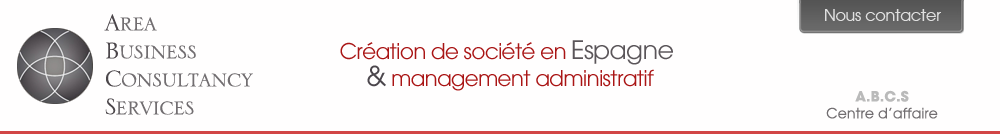
<style>
.page{position:relative;width:1000px;height:134px;background:#fffefe}
.page>*{position:absolute;margin:0}
.t1{font:30px/28px "SerlioLH";letter-spacing:-0.03em;color:#726e71}
.t2{font:30px/28px "SerlioLH";letter-spacing:-0.03em;color:#4b464a}
.t3{font:21.5px/27.3px "AvantGarde-Book";letter-spacing:-0.03em;color:#aa1515}
.t4{font:21.5px/27.3px "AvantGarde-Book";letter-spacing:-0.03em;color:#a91515}
.t5{font:25.4px/27.3px "AvantGarde-Book";letter-spacing:-0.03em;color:#5a5559}
.t6{font:27.3px/27.3px "AvantGarde-Book";letter-spacing:-0.03em;color:#4b464c}
.t7{font:14px "AvantGardeLT-Book";letter-spacing:0.01em;color:#726e71}
.t8{font:14px "AvantGardeLT-Bold";letter-spacing:0.01em;color:#bababa}
</style>
<div class="page">
<p class="t1" style="left:104px;top:14px;width:149px;height:101px"><span class="t2">A</span>rea<br><span class="t2">B</span>usiness<br><span class="t2">C</span>onsultancy<br><span class="t2">S</span>ervices</p>
<p class="t3" style="left:340px;top:40px;width:333px;height:51px;text-align:center"><span class="t4">Création de société en </span><span class="t5">Espagne <br></span><span class="t6">&amp; </span>management administratif</p>
<p class="t7" style="left:826px;top:90px;width:112px;height:29px;text-align:center"><span class="t8">A.B.C.S<br></span>Centre d’affaire</p>
</div>
